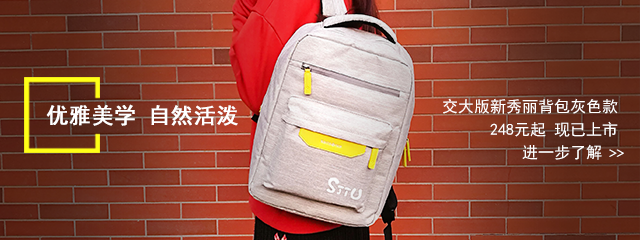
<style>
.page{position:relative;width:640px;height:240px}
.page>*{position:absolute;margin:0}
.t1{font:16px/23px "SimHei";color:#ffffff}
.t2{font:22px "SimHei";color:#ffffff;font-weight:bold}
.t3{font:9.8px "SimHei";color:#ffffff;font-weight:bold;scale:1.62 1}
</style>
<div class="page">
<p class="t1" style="left:443px;top:98px;width:175px;height:62px;text-align:right">交大版新秀丽背包灰色款<br>248元起 现已上市<br>进一步了解</p>
<p class="t2" style="left:46px;top:104px;width:192px;height:22px">优雅美学 自然活泼</p>
<p class="t3" style="left:609px;top:149px;width:15px;height:8px">&gt;&gt;</p>
</div>
